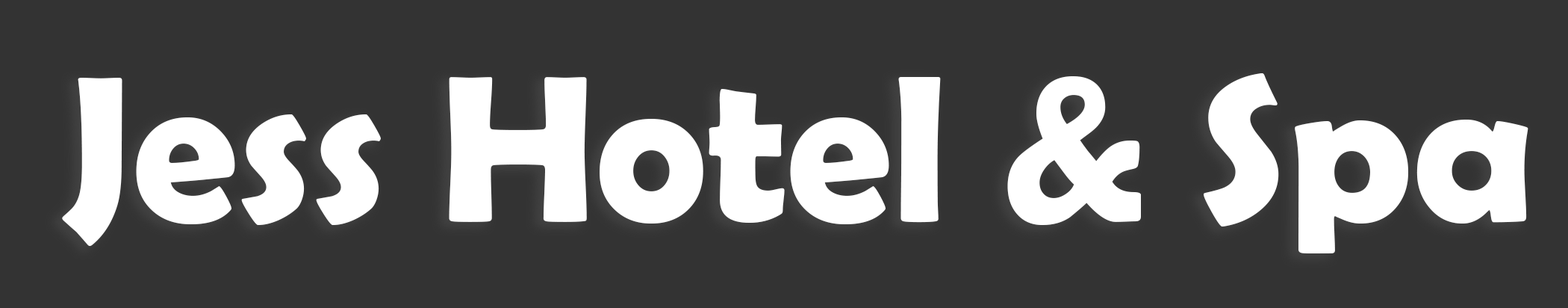
<style>
.page{position:relative;width:1568px;height:308px;background:#333333}
.page>*{position:absolute;margin:0}
.t1{font:210px "BerlinSansFBDemi-Bold";color:#ffffff}
</style>
<div class="page">
<p class="t1" style="left:62px;top:73px;width:1466px;height:180px">Jess Hotel &amp; Spa</p>
</div>
